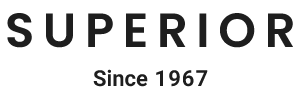
<style>
.page{position:relative;width:300px;height:100px;background:#ffffff}
.page>*{position:absolute;margin:0}
.t1{font:48px "Poppins-SemiBold";letter-spacing:0.18em;color:#1e1e1e}
.t2{font:22px "Heebo-SemiBold";color:#1e1e1e}
.t3{font:22px "Heebo-SemiBold";letter-spacing:0.05em;color:#1e1e1e}
</style>
<div class="page">
<p class="t1" style="left:7px;top:13px;width:286px;height:35px">SUPERIOR</p>
<p class="t2" style="left:93px;top:69px;width:115px;height:18px">Since<span class="t3"> 1967</span></p>
</div>
